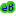
<style>
.page{position:relative;width:16px;height:16px;background:#ffffff}
.page>*{position:absolute;margin:0}
.t1{font:11.4px "MyriadPro-Regular"}
</style>
<div class="page">
<p class="t1" style="left:2px;top:3px;width:12px;height:8px">eB</p>
</div>
